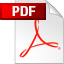
<style>
.page{position:relative;width:64px;height:64px;background:#ffffff}
.page>*{position:absolute;margin:0}
.t1{font:13px "HelveticaNeueLTPro-BdCn";color:#fff9f9;scale:1.2 1}
</style>
<div class="page">
<p class="t1" style="left:12px;top:6px;width:24px;height:10px">PDF</p>
</div>
